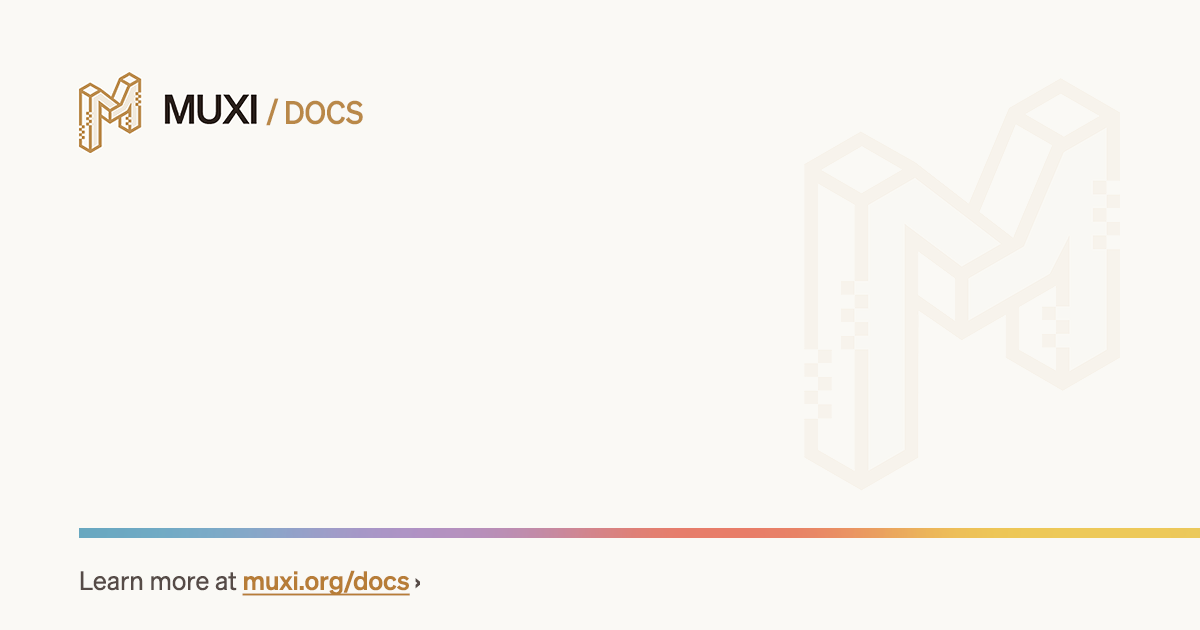
<style>
.page{position:relative;width:1200px;height:630px;background:#faf9f5}
.page>*{position:absolute;margin:0}
.t1{font:32px "ShneVF-Krftig";letter-spacing:0.05em;color:#b98848;scale:0.92 1}
.t2{font:32px "ShneVF-Krftig";color:#b98848;scale:0.92 1}
.t3{font:26px "SohneVF-Buch"}
.t4{font:26px "ShneVF-Krftig";text-decoration:underline}
.t5{font:26px "ShneVF-Krftig"}
</style>
<div class="page">
<p class="t1" style="left:266px;top:98px;width:13px;height:28px">/</p>
<p class="t2" style="left:286px;top:100px;width:77px;height:25px">DOCS</p>
<p class="t3" style="left:80px;top:570px;width:340px;height:26px">Learn more at <span class="t4">muxi.org/docs</span><span class="t5"> ›</span></p>
</div>
